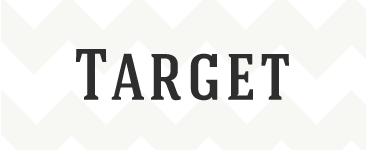
<style>
.page{position:relative;width:366px;height:150px;background:#f7f7f4}
.page>*{position:absolute;margin:0}
.t1{font:72px "HaginCapsMedium";letter-spacing:0.05em;color:#2e2e2e}
</style>
<div class="page">
<p class="t1" style="left:76px;top:49px;width:213px;height:52px">Target</p>
</div>
